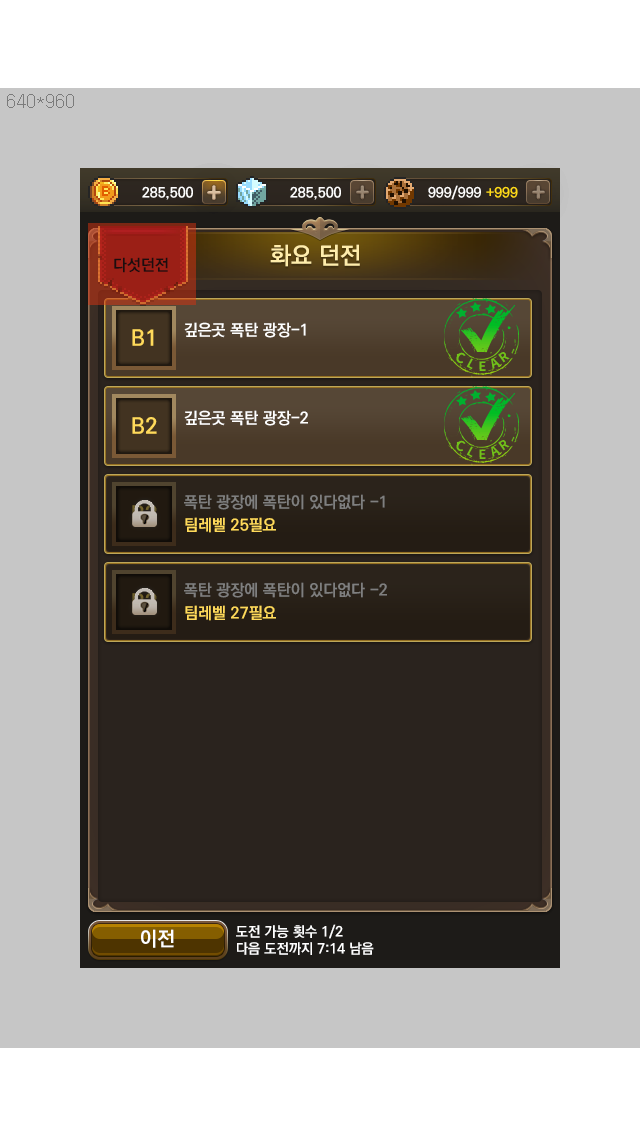
<style>
.page{position:relative;width:640px;height:1136px;background:#c6c6c6}
.page>*{position:absolute;margin:0}
.t1{font:24px "KoPubDotumBold";color:#ffedab}
.t2{font:16px "KoPubDotumBold";color:#1b0e0f}
.t3{font:22px "KoPubDotumBold";color:#ffda5b}
.t4{font:16px "KoPubDotumBold";color:#ffffff}
.t5{font:13.7px "NotoSansCJKkr-Bold";letter-spacing:0.02em;color:#71c219;text-transform:uppercase}
.t6{font:12.5px "NotoSansCJKkr-Bold";letter-spacing:0.02em;color:#71c219;text-transform:uppercase}
.t7{font:12.8px "NotoSansCJKkr-Bold";letter-spacing:0.02em;color:#71c219;text-transform:uppercase}
.t8{font:13px "NotoSansCJKkr-Bold";letter-spacing:0.02em;color:#71c219;text-transform:uppercase}
.t9{font:16px "KoPubDotumBold";color:#7f7f7f}
.t10{font:16px "KoPubDotumBold";color:#ffda5b}
.t11{font:20px "KoPubDotumBold";color:#ffffff}
.t12{font:14px "KoPubDotumBold";color:#ffffff}
</style>
<div class="page">
<p class="t1" style="left:270px;top:244px;width:90px;height:23px">화요 던전</p>
<p class="t2" style="left:114px;top:257px;width:54px;height:16px">다섯던전</p>
<p class="t3" style="left:132px;top:329px;width:22px;height:17px">B1</p>
<p class="t4" style="left:184px;top:322px;width:122px;height:16px">깊은곳 폭탄 광장-1</p>
<p class="t5" style="left:456px;top:352px;width:10px;height:12px;rotate:19deg">c</p>
<p class="t6" style="left:498px;top:352px;width:12px;height:11px;rotate:-35deg">r</p>
<p class="t6" style="left:466px;top:358px;width:7px;height:12px;rotate:29deg">l</p>
<p class="t7" style="left:479px;top:361px;width:7px;height:10px;rotate:-1deg">e</p>
<p class="t8" style="left:491px;top:358px;width:10px;height:11px;rotate:-27deg">a</p>
<p class="t4" style="left:184px;top:410px;width:124px;height:16px">깊은곳 폭탄 광장-2</p>
<p class="t3" style="left:132px;top:417px;width:25px;height:17px">B2</p>
<p class="t9" style="left:184px;top:494px;width:201px;height:16px">폭탄 광장에 폭탄이 있다없다 -1</p>
<p class="t10" style="left:185px;top:517px;width:91px;height:16px">팀레벨 25필요</p>
<p class="t9" style="left:184px;top:582px;width:203px;height:16px">폭탄 광장에 폭탄이 있다없다 -2</p>
<p class="t10" style="left:185px;top:605px;width:91px;height:16px">팀레벨 27필요</p>
<p class="t11" style="left:141px;top:929px;width:33px;height:19px">이전</p>
<p class="t12" style="left:236px;top:924px;width:138px;height:31px">도전 가능 횟수 1/2<br>다음 도전까지 7:14 남음</p>
</div>
